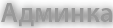
<style>
.page{position:relative;width:113px;height:28px;background:#999999}
.page>*{position:absolute;margin:0}
.t1{font:28px "MyriadPro-Semibold";color:#999999}
</style>
<div class="page">
<p class="t1" style="left:1px;top:3px;width:112px;height:24px">Админка</p>
</div>
